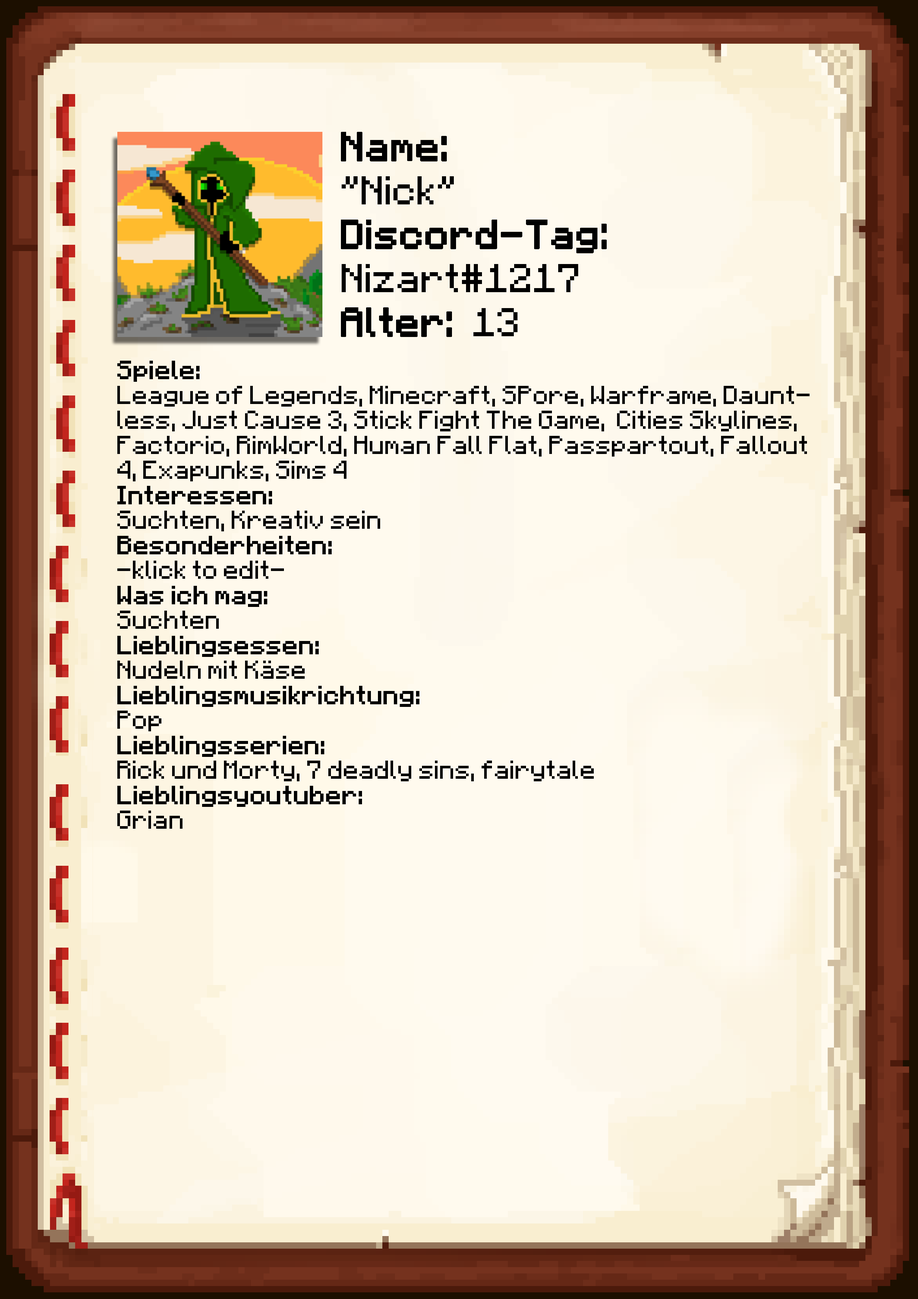
<style>
.page{position:relative;width:918px;height:1299px}
.page>*{position:absolute;margin:0}
.t1{font:40.1px/43.9px "Minecraft-Regular";color:#000000;font-weight:bold}
.t2{font:40.1px/43.9px "Minecraft-Regular";color:#000000}
.t3{font:20.8px "Minecraft";color:#000000}
.t4{font:20.8px "Minecraft";color:#000000;font-weight:bold}
</style>
<div class="page">
<p class="t1" style="left:341px;top:132px;width:266px;height:205px">Name:<br><span class="t2">"Nick"<br></span>Discord-Tag:<br><span class="t2">Nizart#1217<br></span>Alter: <span class="t2">13</span></p>
<p class="t3" style="left:117px;top:361px;width:693px;height:468px"><span class="t4">Spiele: <br></span>League of Legends, Minecraft, SPore, Warframe, Dauntless, Just Cause 3, Stick Fight The Game,  Cities Skylines, Factorio, RimWorld, Human Fall Flat, Passpartout, Fallout 4, Exapunks, Sims 4<br><span class="t4">Interessen:<br></span>Suchten, Kreativ sein<br><span class="t4">Besonderheiten:<br></span>-klick to edit- <br><span class="t4">Was ich mag:<br></span>Suchten<br><span class="t4">Lieblingsessen:<br></span>Nudeln mit Käse<br><span class="t4">Lieblingsmusikrichtung:<br></span>Pop<br><span class="t4">Lieblingsserien:<br></span>Rick und Morty, 7 deadly sins, fairytale<br><span class="t4">Lieblingsyoutuber:<br></span>Grian</p>
</div>
